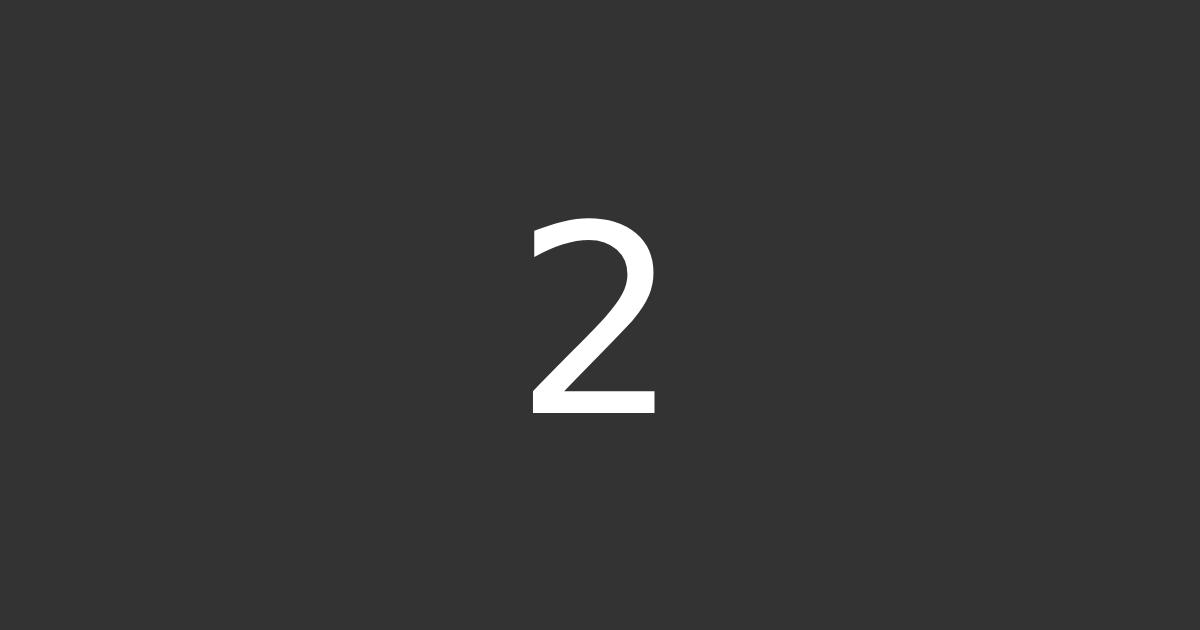
<style>
.page{position:relative;width:1200px;height:630px;background:#333333}
.page>*{position:absolute;margin:0}
.t1{font:262.5px "DejaVuSans";color:#ffffff}
</style>
<div class="page">
<p class="t1" style="left:532px;top:218px;width:123px;height:196px">2</p>
</div>
